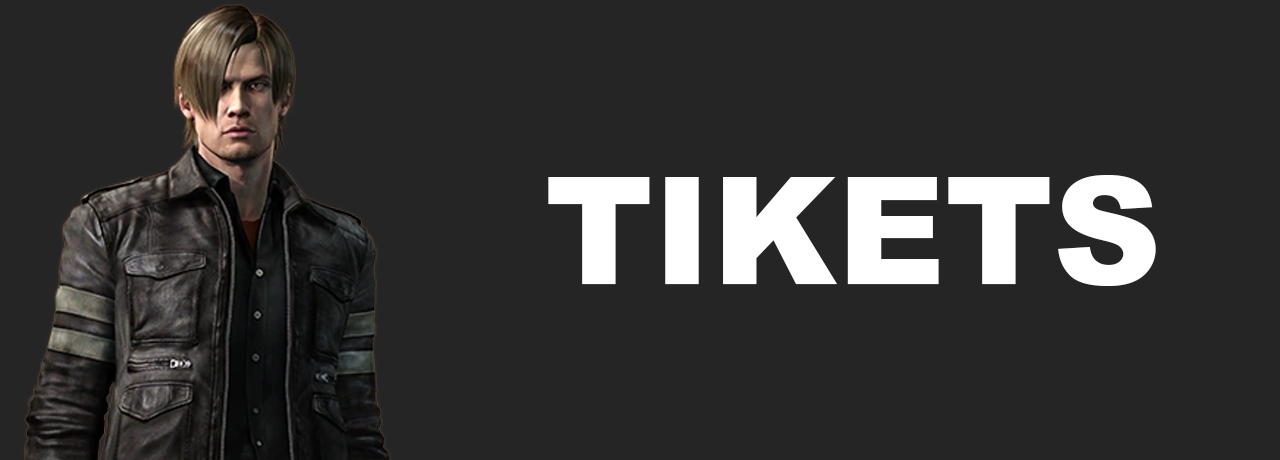
<style>
.page{position:relative;width:1280px;height:460px;background:#252525}
.page>*{position:absolute;margin:0}
.t1{font:150px "Arial-Black";color:#ffffff}
</style>
<div class="page">
<p class="t1" style="left:548px;top:175px;width:608px;height:111px">TIKETS</p>
</div>
